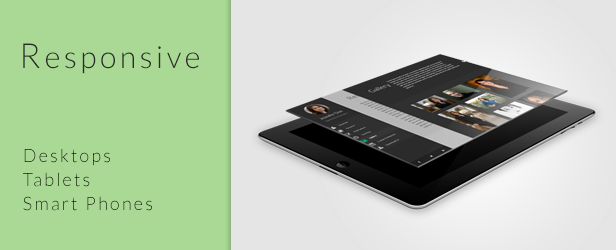
<style>
.page{position:relative;width:616px;height:250px;background:#aad995}
.page>*{position:absolute;margin:0}
.t1{font:30.6px "Lato-Light";letter-spacing:0.12em;color:#2b2b2b}
.t2{font:34.7px "Lato-Light";letter-spacing:0.12em;color:#2b2b2b}
.t3{font:18.4px/24px "Lato-Light";letter-spacing:0.12em}
</style>
<div class="page">
<p class="t1" style="left:23px;top:43px;width:176px;height:31px"><span class="t2">R</span>esponsive</p>
<p class="t3" style="left:23px;top:149px;width:129px;height:62px;text-align:right">Desktops<br>Tablets<br>Smart Phones</p>
</div>
